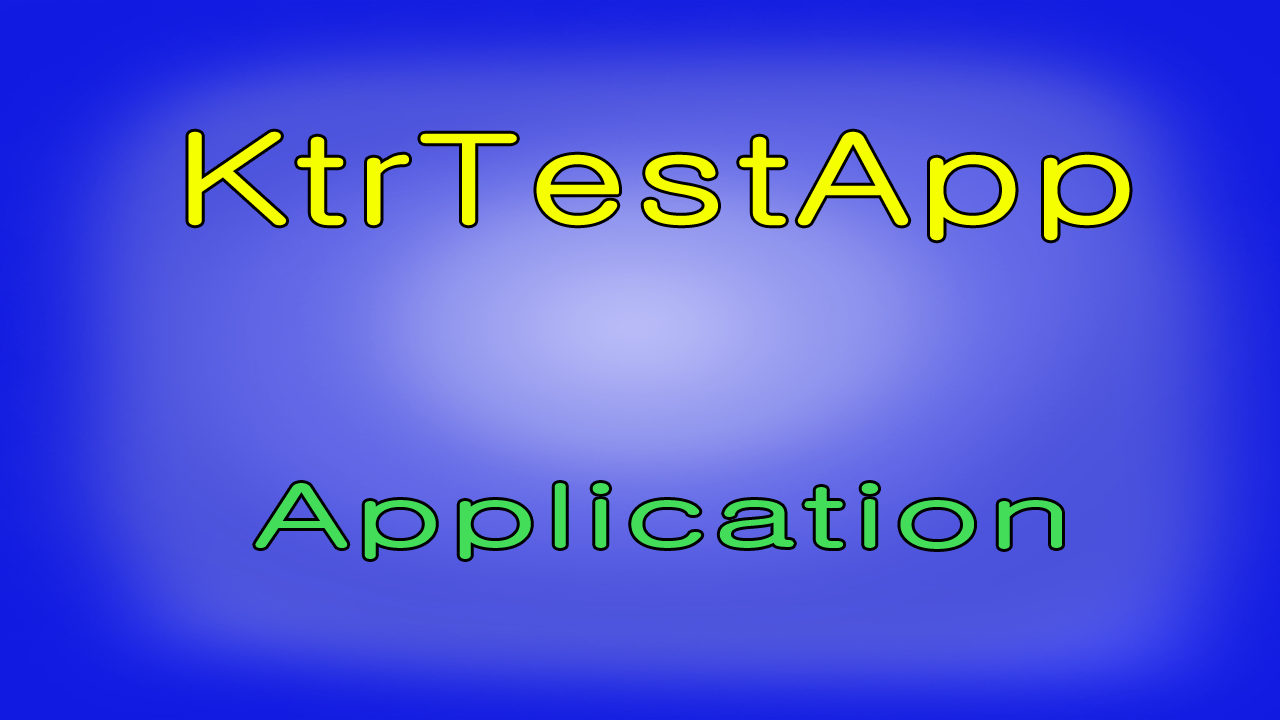
<style>
.page{position:relative;width:1280px;height:720px}
.page>*{position:absolute;margin:0}
.t1{font:121.5px "Gulim";color:#f6ff00;font-weight:bold;scale:1.48 1}
.t2{font:84.4px "Gulim";color:#43dd59;font-weight:bold;scale:1.78 1}
</style>
<div class="page">
<p class="t1" style="left:188px;top:131px;width:942px;height:110px">KtrTestApp</p>
<p class="t2" style="left:255px;top:483px;width:807px;height:76px">Application</p>
</div>
